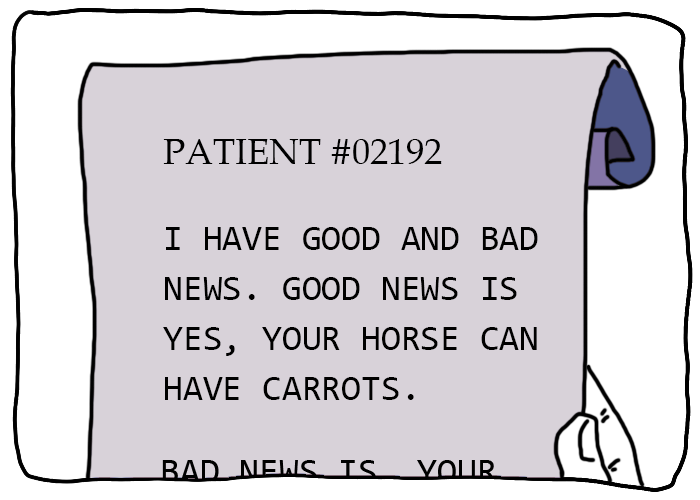
<style>
.page{position:relative;width:700px;height:500px;background:#d8d2d9}
.page>*{position:absolute;margin:0}
.t1{font:36px/50px "Consolas";color:#000000;text-transform:uppercase}
.t2{font:36px/36px "BookAntiqua";color:#000000;text-transform:uppercase}
</style>
<div class="page">
<p class="t1" style="left:163px;top:139px;width:375px;height:261px"><span class="t2">patient #02192<br><br></span>I have good and bad<br>news. good news is<br>yes, your horse can<br>have carrots.</p>
</div>
